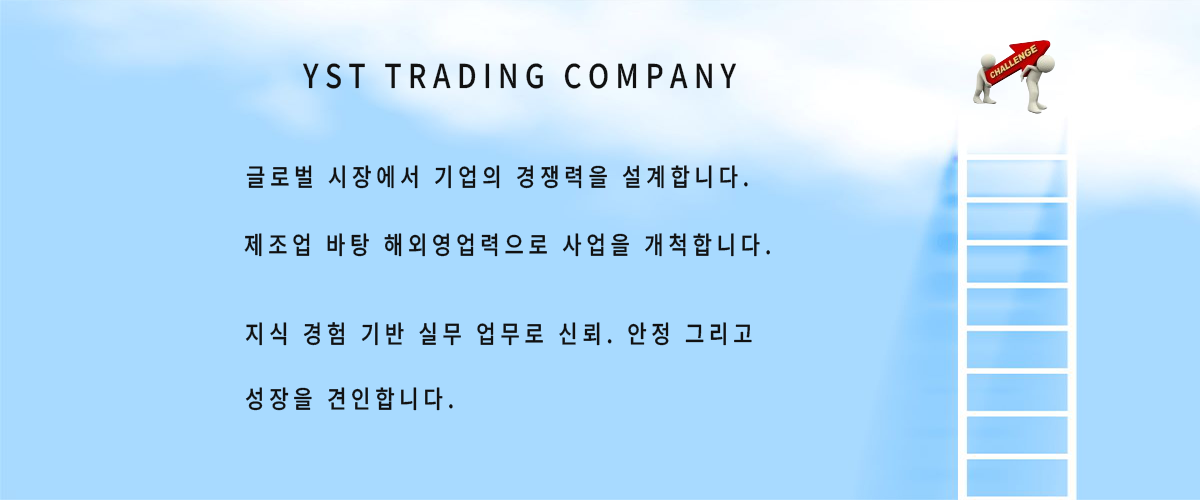
<style>
.page{position:relative;width:1200px;height:500px;background:#a8daff}
.page>*{position:absolute;margin:0}
.t1{font:56.2px "NotoSansKR-Medium";letter-spacing:0.23em;color:#111111;scale:0.85 1}
.t2{font:42.1px "NotoSansKR-Medium";letter-spacing:0.23em;color:#111111;scale:0.85 1}
</style>
<div class="page">
<p class="t1" style="left:303px;top:63px;width:433px;height:26px">YST TRADING COMPANY</p>
<p class="t2" style="left:246px;top:165px;width:502px;height:24px">글로벌 시장에서 기업의 경쟁력을 설계합니다.</p>
<p class="t2" style="left:244px;top:233px;width:526px;height:24px">제조업 바탕 해외영업력으로 사업을 개척합니다.</p>
<p class="t2" style="left:245px;top:322px;width:507px;height:24px">지식 경험 기반 실무 업무로 신뢰. 안정 그리고</p>
<p class="t2" style="left:245px;top:387px;width:208px;height:24px">성장을 견인합니다.</p>
</div>
